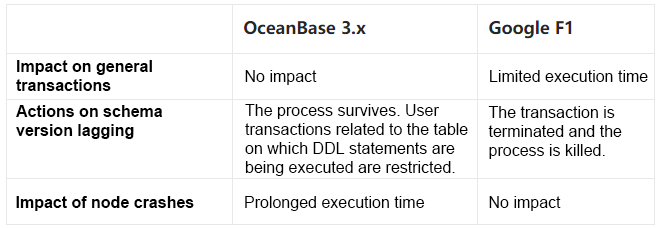
<style>
.page{position:relative;width:659px;height:228px;background:#ffffff}
.page>*{position:absolute;margin:0}
.t1{font:16px/19px "Arial-BoldMT";color:#000000}
.t2{font:16px "ArialMT";color:#000000}
.t3{font:16px/19px "ArialMT";color:#000000}
.t4{font:16px "Arial-BoldMT";color:#000000}
</style>
<div class="page">
<p class="t1" style="left:16px;top:60px;width:136px;height:31px">Impact on general transactions</p>
<p class="t2" style="left:245px;top:70px;width:72px;height:15px">No impact</p>
<p class="t2" style="left:490px;top:70px;width:158px;height:12px">Limited execution time</p>
<p class="t1" style="left:16px;top:105px;width:147px;height:34px">Actions on schema version lagging</p>
<p class="t3" style="left:245px;top:104px;width:223px;height:72px">The process survives. User transactions related to the table on which DDL statements are being executed are restricted.</p>
<p class="t3" style="left:488px;top:106px;width:134px;height:53px">The transaction is terminated and the process is killed.</p>
<p class="t4" style="left:16px;top:196px;width:178px;height:15px">Impact of node crashes</p>
<p class="t2" style="left:245px;top:196px;width:180px;height:15px">Prolonged execution time</p>
<p class="t2" style="left:489px;top:196px;width:72px;height:15px">No impact</p>
</div>
